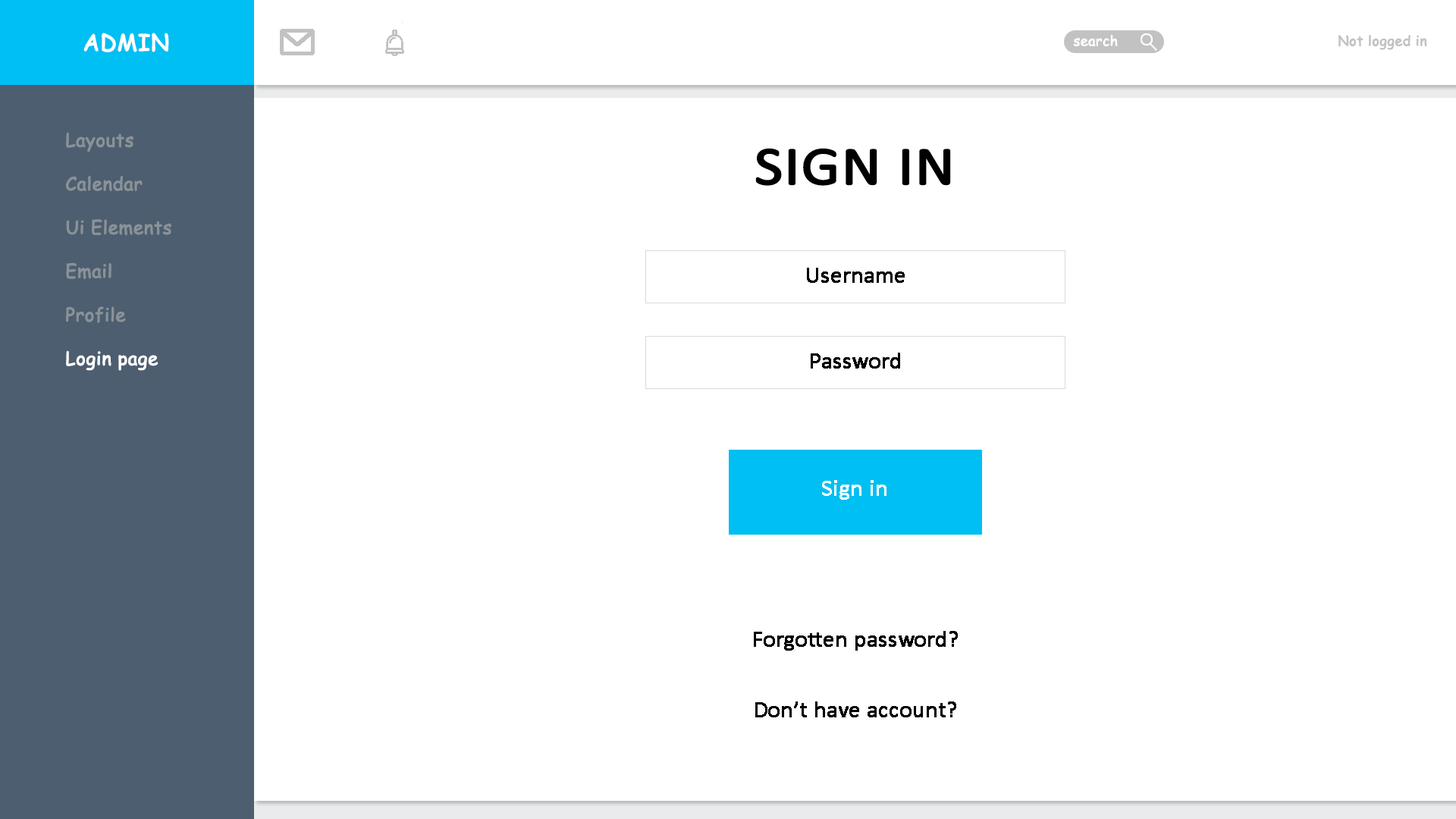
<style>
.page{position:relative;width:1456px;height:819px;background:#ffffff}
.page>*{position:absolute;margin:0}
.t1{font:22.7px "ComicSansMS";color:#ffffff;font-weight:bold}
.t2{font:13.6px "ComicSansMS";color:#fefefe;font-weight:bold}
.t3{font:18.2px "ComicSansMS";color:#899297;font-weight:bold}
.t4{font:18.2px "ComicSansMS";color:#ffffff;font-weight:bold}
.t5{font:54.6px "Calibri";color:#000000;font-weight:bold;scale:1.12 1}
.t6{font:22.7px "Calibri";color:#000000;font-weight:bold}
.t7{font:22.7px "Calibri";color:#fefefe;font-weight:bold}
</style>
<div class="page">
<p class="t1" style="left:83px;top:33px;width:86px;height:19px">ADMIN</p>
<p class="t2" style="left:1073px;top:34px;width:45px;height:13px">search</p>
<p class="t3" style="left:66px;top:132px;width:105px;height:239px">Layouts<br><br>Calendar<br><br>Ui Elements<br><br>Email<br><br>Profile<br><br><span class="t4">Login page</span></p>
<p class="t5" style="left:755px;top:148px;width:196px;height:38px">SIGN IN</p>
<p class="t6" style="left:807px;top:268px;width:98px;height:15px">Username</p>
<p class="t6" style="left:811px;top:353px;width:89px;height:16px">Password</p>
<p class="t7" style="left:822px;top:480px;width:64px;height:20px">Sign in</p>
<p class="t6" style="left:754px;top:631px;width:204px;height:20px">Forgotten password?</p>
<p class="t6" style="left:755px;top:701px;width:201px;height:16px">Don’t have account?</p>
</div>
